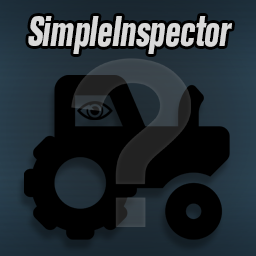
<style>
.page{position:relative;width:256px;height:256px;background:#000000}
.page>*{position:absolute;margin:0}
.t1{font:42px "AkzidenzGroteskBQ-XBdCnd";letter-spacing:-0.005em;color:#d9d9d9;font-style:italic;scale:0.75 1}
</style>
<div class="page">
<p class="t1" style="left:28px;top:16px;width:204px;height:38px">SimpleInspector</p>
</div>
